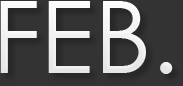
<style>
.page{position:relative;width:183px;height:86px;background:#333333}
.page>*{position:absolute;margin:0}
.t1{font:100px "CenturyGothic";color:#ffffff}
</style>
<div class="page">
<p class="t1" style="left:0px;top:1px;width:173px;height:73px">FEB.</p>
</div>
